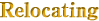
<style>
.page{position:relative;width:99px;height:21px;background:#ffffff}
.page>*{position:absolute;margin:0}
.t1{font:20px "RyuminPro-ExBold";letter-spacing:-0.04em;font-weight:bold}
</style>
<div class="page">
<p class="t1" style="left:0px;top:2px;width:99px;height:19px">Relocating</p>
</div>
